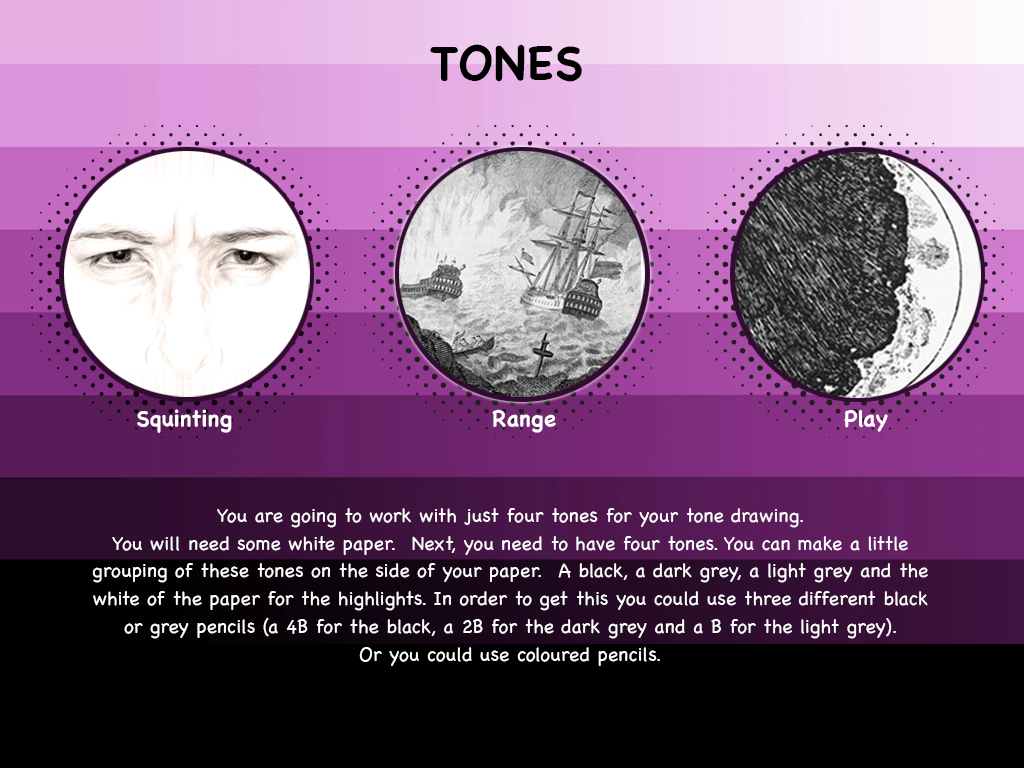
<style>
.page{position:relative;width:1024px;height:768px}
.page>*{position:absolute;margin:0}
.t1{font:48px "Chalkboard-Bold";color:#000000;text-transform:uppercase}
.t2{font:22.2px "Chalkboard-Bold";color:#ffffff}
.t3{font:19.4px/27.8px "Chalkboard";color:#ffffff}
</style>
<div class="page">
<p class="t1" style="left:430px;top:44px;width:152px;height:38px">Tones</p>
<p class="t2" style="left:137px;top:409px;width:95px;height:24px">Squinting</p>
<p class="t2" style="left:492px;top:409px;width:64px;height:24px">Range</p>
<p class="t2" style="left:844px;top:410px;width:44px;height:22px">Play</p>
<p class="t3" style="left:92px;top:508px;width:836px;height:158px;text-align:center">You are going to work with just four tones for your tone drawing.<br>You will need some white paper.  Next, you need to have four tones. You can make a little grouping of these tones on the side of your paper.  A black, a dark grey, a light grey and the white of the paper for the highlights. In order to get this you could use three different black or grey pencils (a 4B for the black, a 2B for the dark grey and a B for the light grey). <br>Or you could use coloured pencils.</p>
</div>
